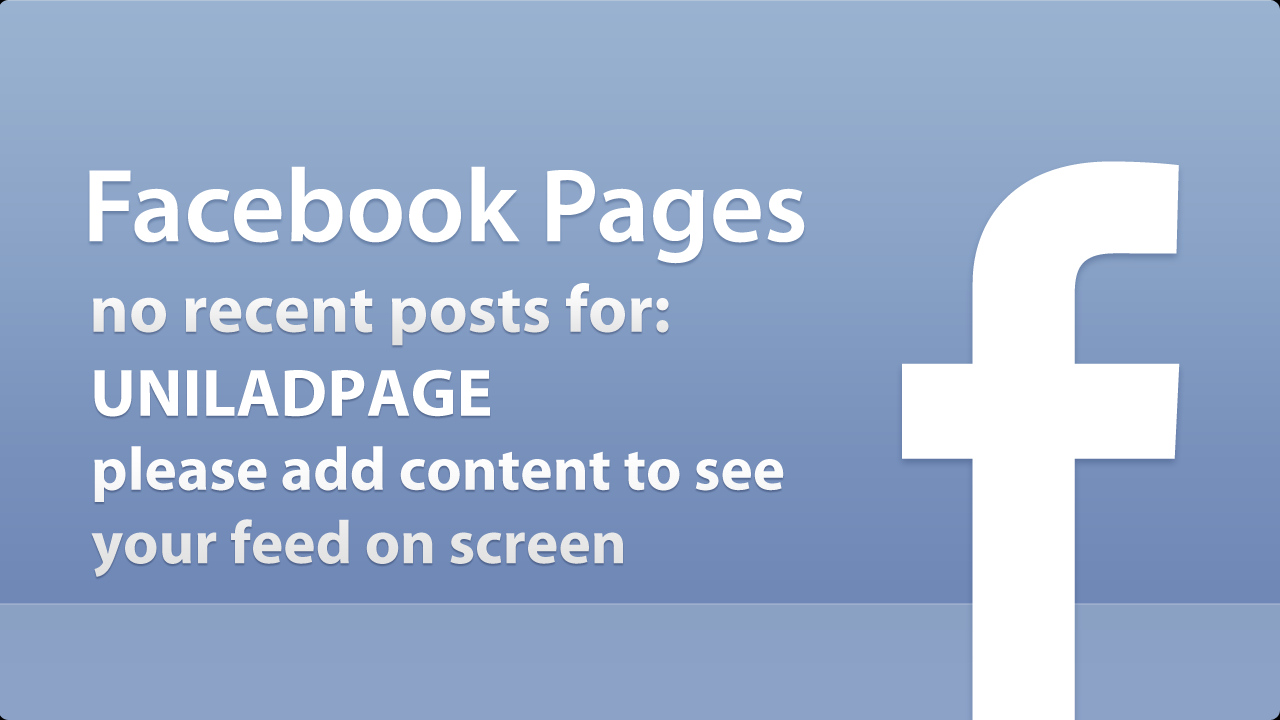
<style>
.page{position:relative;width:1280px;height:720px}
.page>*{position:absolute;margin:0}
.t1{font:67.8px "MyriadPro-Bold";color:#f1f0f0}
.t2{font:67.4px "MyriadPro-Bold";color:#ffffff}
.t3{font:61.4px "MyriadPro-Bold";color:#f7f7f7}
</style>
<div class="page">
<p class="t1" style="left:93px;top:283px;width:576px;height:63px">no recent posts for:</p>
<p class="t2" style="left:94px;top:369px;width:396px;height:48px">UNILADPAGE</p>
<p class="t3" style="left:91px;top:446px;width:693px;height:131px">please add content to see<br>your feed on screen</p>
</div>
